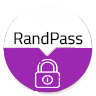
<style>
.page{position:relative;width:96px;height:96px;background:#ffffff}
.page>*{position:absolute;margin:0}
.t1{font:16.7px "TitilliumWeb-Regular";color:#000000}
</style>
<div class="page">
<p class="t1" style="left:14px;top:31px;width:69px;height:14px">RandPass</p>
</div>
